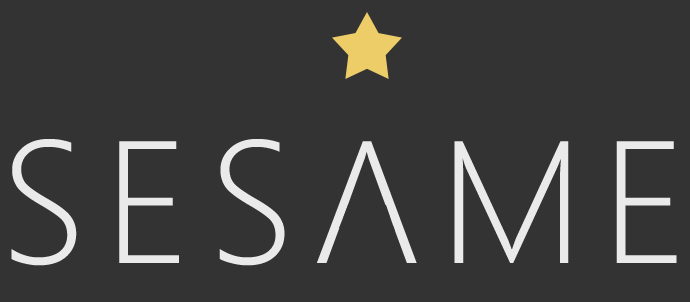
<style>
.page{position:relative;width:690px;height:302px;background:#333333}
.page>*{position:absolute;margin:0}
.t1{font:174px "SegoeUI-Light";letter-spacing:0.1em;color:#eaeaea;text-transform:uppercase}
</style>
<div class="page">
<p class="t1" style="left:11px;top:139px;width:666px;height:127px">SESAME</p>
</div>
